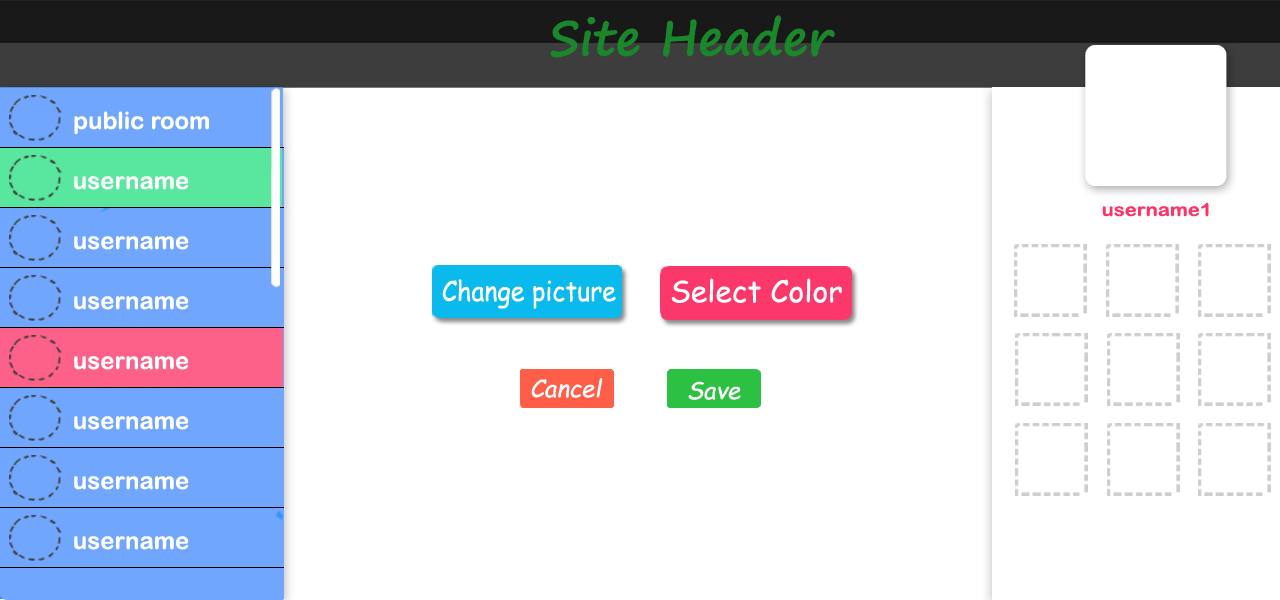
<style>
.page{position:relative;width:1280px;height:600px;background:#ffffff}
.page>*{position:absolute;margin:0}
.t1{font:48px "SegoePrint-Bold";color:#19872a}
.t2{font:24px "ArialRoundedMTBold";color:#ffffff}
.t3{font:18px "ArialRoundedMTBold";color:#ff3366;scale:1.12 1}
.t4{font:27.6px "ComicSansMS";color:#ffffff;scale:0.91 1}
.t5{font:30px "ComicSansMS";color:#ffffff}
.t6{font:24px "ComicSansMS-Italic";color:#ffffff}
</style>
<div class="page">
<p class="t1" style="left:550px;top:15px;width:285px;height:43px">Site Header</p>
<p class="t2" style="left:74px;top:111px;width:135px;height:24px">public room</p>
<p class="t2" style="left:74px;top:176px;width:115px;height:14px">username</p>
<p class="t3" style="left:1102px;top:202px;width:107px;height:15px">username1</p>
<p class="t2" style="left:74px;top:236px;width:115px;height:14px">username</p>
<p class="t4" style="left:442px;top:279px;width:174px;height:30px">Change picture</p>
<p class="t5" style="left:671px;top:278px;width:171px;height:25px">Select Color</p>
<p class="t2" style="left:74px;top:296px;width:115px;height:14px">username</p>
<p class="t2" style="left:74px;top:356px;width:115px;height:14px">username</p>
<p class="t6" style="left:531px;top:378px;width:72px;height:20px">Cancel</p>
<p class="t6" style="left:688px;top:381px;width:53px;height:19px">Save</p>
<p class="t2" style="left:74px;top:416px;width:115px;height:14px">username</p>
<p class="t2" style="left:74px;top:476px;width:115px;height:14px">username</p>
<p class="t2" style="left:74px;top:536px;width:115px;height:14px">username</p>
</div>
